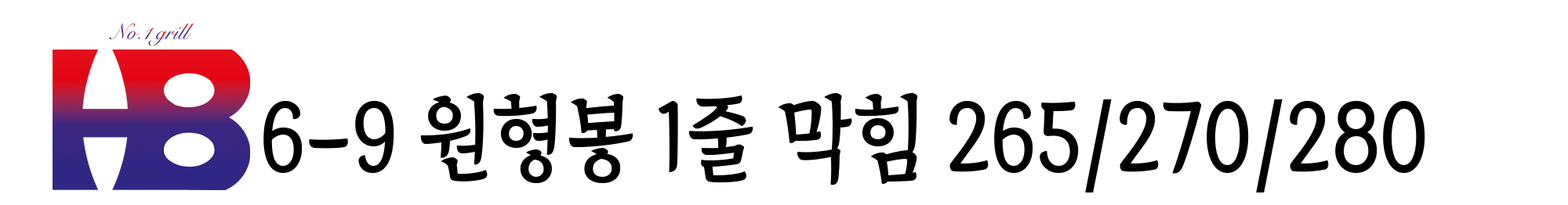
<style>
.page{position:relative;width:1568px;height:205px;background:#ffffff}
.page>*{position:absolute;margin:0}
.t1{font:93.7px "TheIndependenceHallofKorea-Regular";color:#000000;scale:0.89 1}
</style>
<div class="page">
<p class="t1" style="left:263px;top:93px;width:1162px;height:100px">6-9 원형봉 1줄 막힘 265/270/280</p>
</div>
